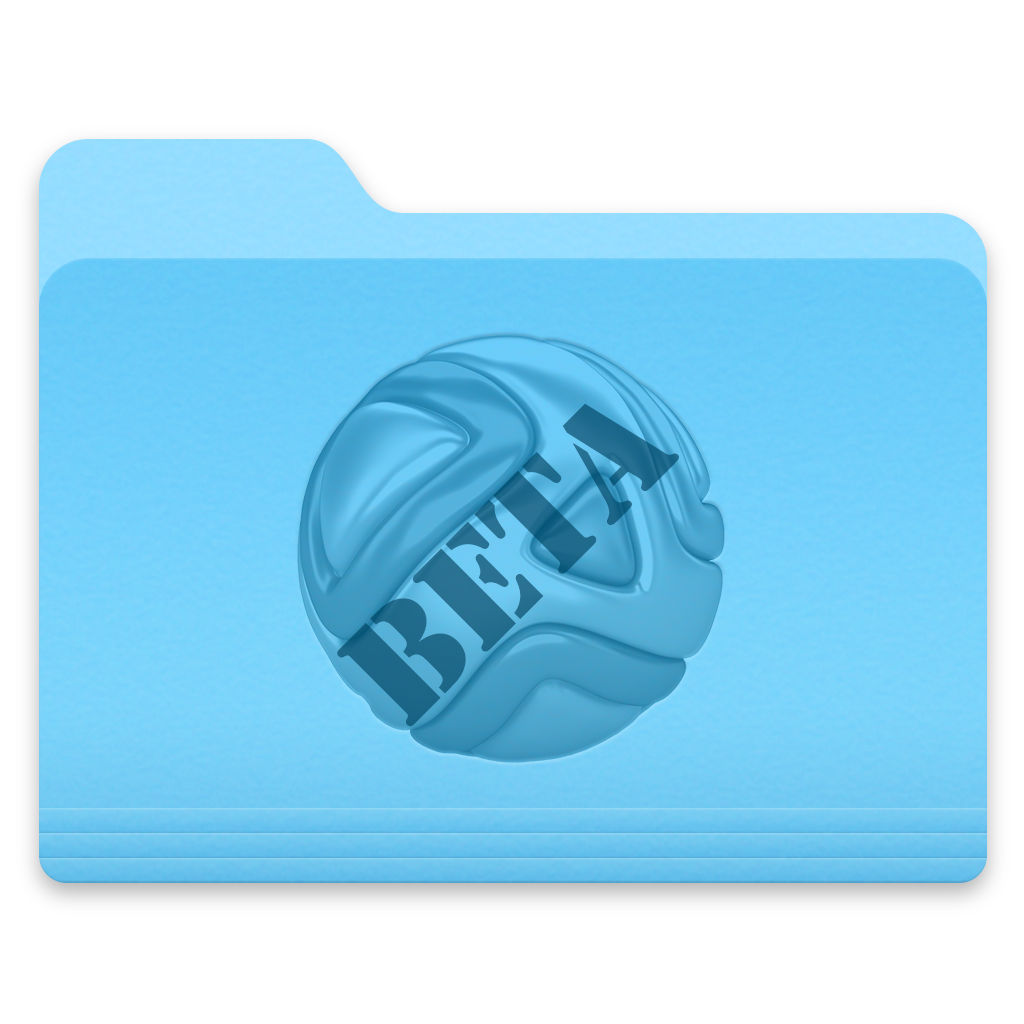
<style>
.page{position:relative;width:1024px;height:1024px;background:#ffffff}
.page>*{position:absolute;margin:0}
.t1{font:141px "StencilStd";color:#1f6a8c}
</style>
<div class="page">
<p class="t1" style="left:337px;top:403px;width:342px;height:324px;rotate:-45deg">BETA</p>
</div>
